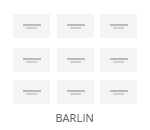
<style>
.page{position:relative;width:150px;height:130px;background:#ffffff}
.page>*{position:absolute;margin:0}
.t1{font:11px "OpenSans";color:#686868;text-transform:uppercase}
</style>
<div class="page">
<p class="t1" style="left:56px;top:114px;width:37px;height:8px">Barlin</p>
</div>
